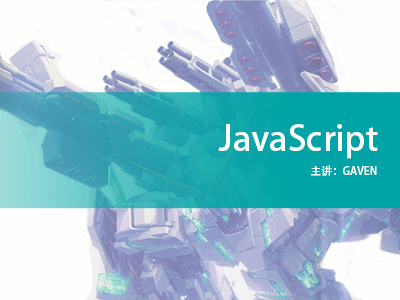
<style>
.page{position:relative;width:400px;height:300px;background:#fefefc}
.page>*{position:absolute;margin:0}
.t1{font:34.6px "AdobeHeitiStd-Regular";color:#ffffff}
.t2{font:10.8px "AdobeHeitiStd-Regular";color:#ffffff}
</style>
<div class="page">
<p class="t1" style="left:218px;top:124px;width:160px;height:35px">JavaScript</p>
<p class="t2" style="left:311px;top:165px;width:66px;height:11px">主讲：GAVEN</p>
</div>
